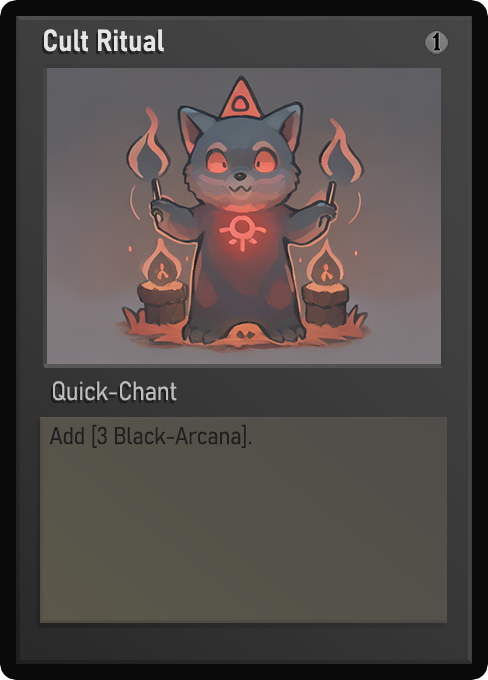
<style>
.page{position:relative;width:488px;height:680px}
.page>*{position:absolute;margin:0}
.t1{font:30px "Bahnschrift-SemiBoldSemiCondensed";color:#f2f2f2;font-weight:bold}
.t2{font:25px "WTRRoycroft";color:#000000;font-weight:bold;scale:1.09 1}
.t3{font:26px "Bahnschrift-LightSemiCondensed";color:#c8c8c8;font-weight:bold}
.t4{font:24px "Bahnschrift-LightSemiCondensed";color:#1e1e1e;font-weight:bold}
</style>
<div class="page">
<p class="t1" style="left:44px;top:29px;width:120px;height:23px;opacity:0.9">Cult Ritual</p>
<p class="t2" style="left:432px;top:32px;width:9px;height:19px">1</p>
<p class="t3" style="left:53px;top:381px;width:124px;height:20px;opacity:0.9">Quick-Chant</p>
<p class="t4" style="left:49px;top:424px;width:202px;height:24px">Add [3 Black-Arcana].</p>
</div>
